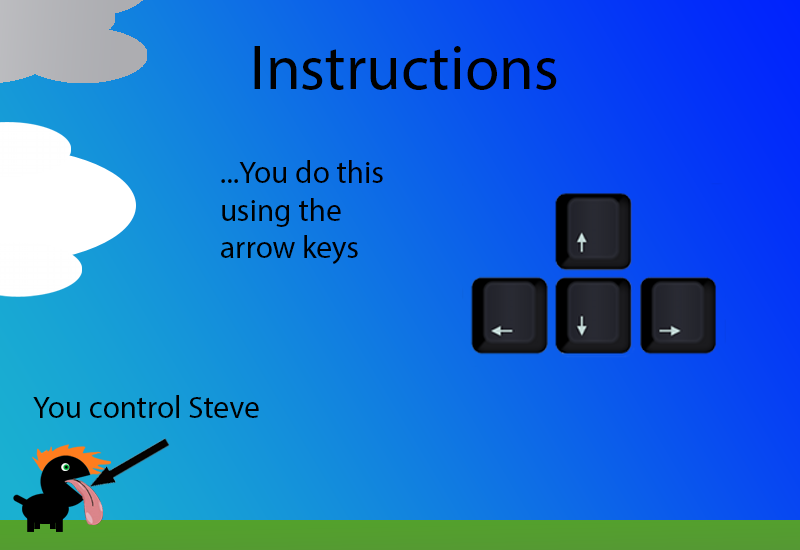
<style>
.page{position:relative;width:800px;height:550px}
.page>*{position:absolute;margin:0}
.t1{font:62.5px "MyriadPro-Regular";color:#000000}
.t2{font:31.2px "MyriadPro-Regular";color:#000000}
</style>
<div class="page">
<p class="t1" style="left:254px;top:46px;width:303px;height:44px">Instructions</p>
<p class="t2" style="left:221px;top:160px;width:162px;height:104px">...You do this using the arrow keys</p>
<p class="t2" style="left:33px;top:395px;width:226px;height:23px">You control Steve</p>
</div>
